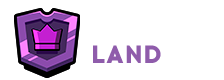
<style>
.page{position:relative;width:224px;height:80px;background:#ffffff}
.page>*{position:absolute;margin:0}
.t1{font:25px "Acrom-ExtraBold";color:#8f5cab}
</style>
<div class="page">
<p class="t1" style="left:93px;top:45px;width:68px;height:18px">LAND</p>
</div>
